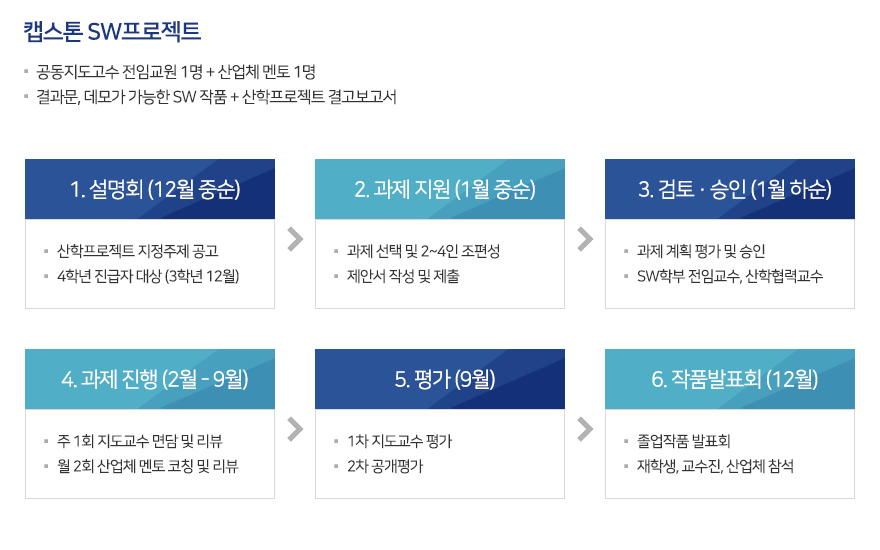
<style>
.page{position:relative;width:880px;height:550px;background:#ffffff}
.page>*{position:absolute;margin:0}
.t1{font:23px "NanumSquareB";letter-spacing:-0.05em;color:#1a3980}
.t2{font:16px/25px "NanumSquareR";letter-spacing:-0.05em;color:#333333}
.t3{font:34px/25px "NanumSquareR";letter-spacing:-0.05em;color:#acacac}
.t4{font:21px "NanumSquareR";letter-spacing:-0.05em;color:#ffffff}
.t5{font:15px/25px "NanumSquareR";letter-spacing:-0.05em;color:#333333}
</style>
<div class="page">
<p class="t1" style="left:24px;top:21px;width:177px;height:22px">캡스톤 SW프로젝트</p>
<p class="t2" style="left:36px;top:64px;width:360px;height:41px">공동지도고수 전임교원 1명 + 산업체 멘토 1명<br>결과문, 데모가 가능한 SW 작품 + 산학프로젝트 결고보고서</p>
<p class="t3" style="left:24px;top:69px;width:4px;height:29px">.<br>.</p>
<p class="t4" style="left:71px;top:179px;width:169px;height:21px">1. 설명회 (12월 중순)</p>
<p class="t4" style="left:355px;top:179px;width:180px;height:21px">2. 과제 지원 (1월 중순)</p>
<p class="t4" style="left:639px;top:179px;width:192px;height:21px">3. 검토 · 승인 (1월 하순)</p>
<p class="t5" style="left:57px;top:244px;width:182px;height:40px">산학프로젝트 지정주제 공고<br>4학년 진급자 대상 (3학년 12월)</p>
<p class="t5" style="left:347px;top:244px;width:152px;height:40px">과제 선택 및 2~4인 조편성<br>제안서 작성 및 제출</p>
<p class="t5" style="left:637px;top:244px;width:186px;height:40px">과제 계획 평가 및 승인<br>SW학부 전임교수, 산학협력교수</p>
<p class="t3" style="left:44px;top:249px;width:4px;height:29px">.<br>.</p>
<p class="t3" style="left:334px;top:249px;width:4px;height:29px">.<br>.</p>
<p class="t3" style="left:624px;top:249px;width:4px;height:29px">.<br>.</p>
<p class="t4" style="left:61px;top:369px;width:187px;height:21px">4. 과제 진행 (2월 - 9월)</p>
<p class="t4" style="left:395px;top:369px;width:100px;height:21px">5. 평가 (9월)</p>
<p class="t4" style="left:652px;top:369px;width:166px;height:21px">6. 작품발표회 (12월)</p>
<p class="t5" style="left:57px;top:434px;width:182px;height:40px">주 1회 지도교수 면담 및 리뷰<br>월 2회 산업체 멘토 코칭 및 리뷰</p>
<p class="t5" style="left:348px;top:434px;width:105px;height:40px">1차 지도교수 평가<br>2차 공개평가</p>
<p class="t5" style="left:637px;top:434px;width:156px;height:40px">졸업작품 발표회<br>재학생, 교수진, 산업체 참석</p>
<p class="t3" style="left:44px;top:439px;width:4px;height:29px">.<br>.</p>
<p class="t3" style="left:334px;top:439px;width:4px;height:29px">.<br>.</p>
<p class="t3" style="left:624px;top:439px;width:4px;height:29px">.<br>.</p>
</div>
